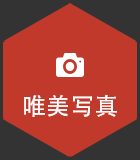
<style>
.page{position:relative;width:140px;height:160px;background:#c0392b}
.page>*{position:absolute;margin:0}
.t1{font:24px "AdobeHeitiStd-Regular";color:#ffffff}
</style>
<div class="page">
<p class="t1" style="left:24px;top:94px;width:93px;height:23px">唯美写真</p>
</div>
